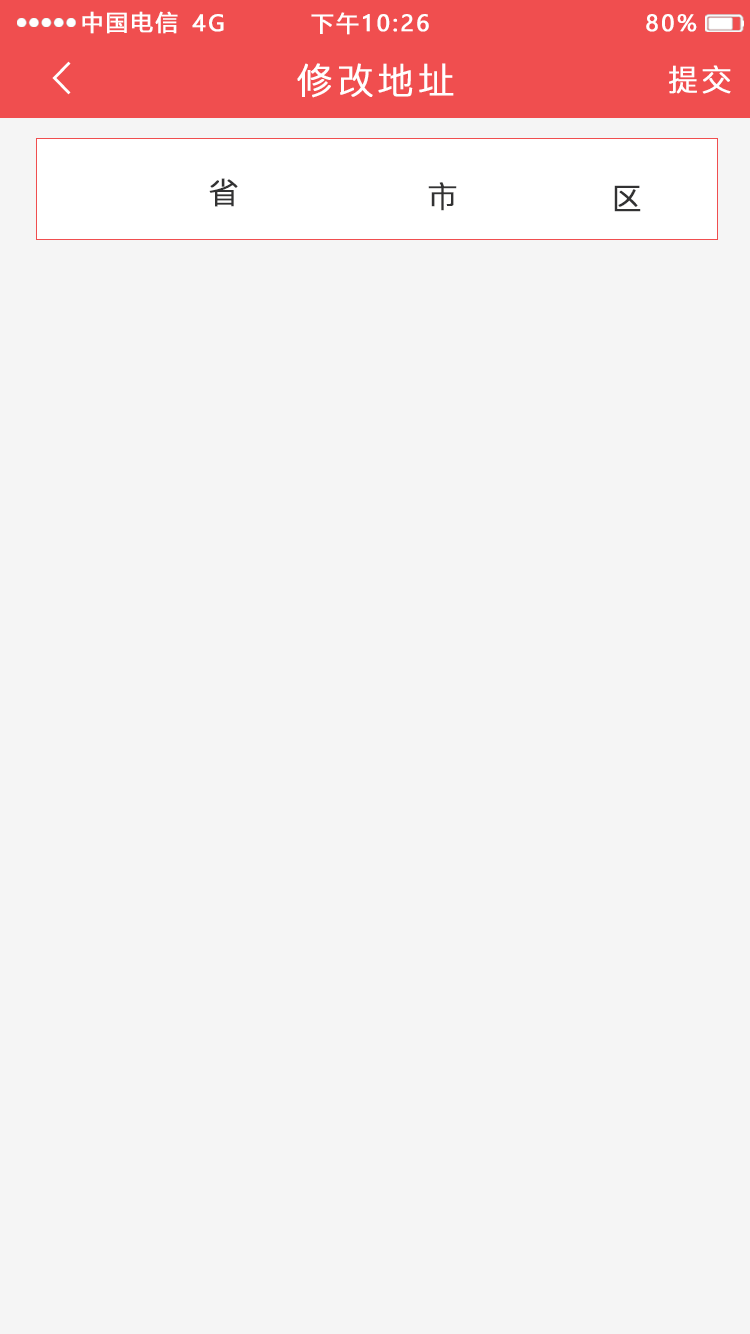
<style>
.page{position:relative;width:750px;height:1334px;background:#f5f5f5}
.page>*{position:absolute;margin:0}
.t1{font:22px "MicrosoftYaHei";letter-spacing:0.1em;color:#ffffff;text-transform:uppercase;font-weight:bold}
.t2{font:36px "PingFang-SC-Regular";letter-spacing:0.1em;color:#ffffff;text-transform:uppercase;font-weight:bold}
.t3{font:30px "PingFang-SC-Regular";letter-spacing:0.1em;color:#ffffff;text-transform:uppercase;font-weight:bold}
.t4{font:30px "PingFang-SC-Regular";letter-spacing:0.1em;color:#323233;text-transform:uppercase;font-weight:bold}
</style>
<div class="page">
<p class="t1" style="left:82px;top:11px;width:96px;height:23px">中国电信</p>
<p class="t1" style="left:192px;top:14px;width:32px;height:18px">4G</p>
<p class="t1" style="left:311px;top:12px;width:118px;height:23px">下午10:26</p>
<p class="t1" style="left:646px;top:14px;width:51px;height:18px">80%</p>
<p class="t2" style="left:297px;top:63px;width:157px;height:35px">修改地址</p>
<p class="t3" style="left:669px;top:65px;width:62px;height:29px">提交</p>
<p class="t4" style="left:209px;top:178px;width:29px;height:29px">省</p>
<p class="t4" style="left:428px;top:182px;width:29px;height:29px">市</p>
<p class="t4" style="left:614px;top:185px;width:27px;height:27px">区</p>
</div>
